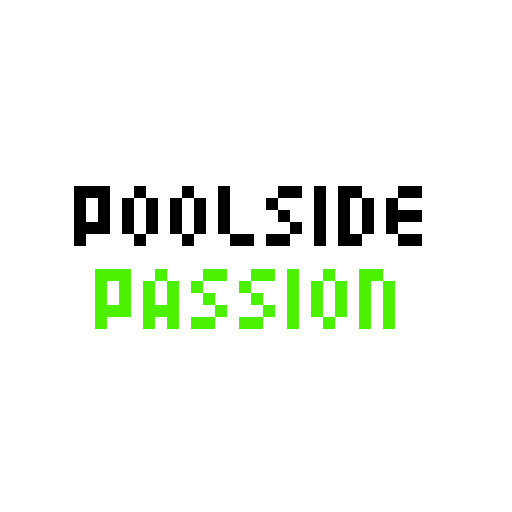
<style>
.page{position:relative;width:512px;height:512px;background:#ffffff}
.page>*{position:absolute;margin:0}
.t1{font:96px "04b24";color:#000000}
.t2{font:96px "04b24";color:#4cf100}
</style>
<div class="page">
<p class="t1" style="left:74px;top:186px;width:348px;height:60px">Poolside</p>
<p class="t2" style="left:95px;top:269px;width:300px;height:60px">Passion</p>
</div>
